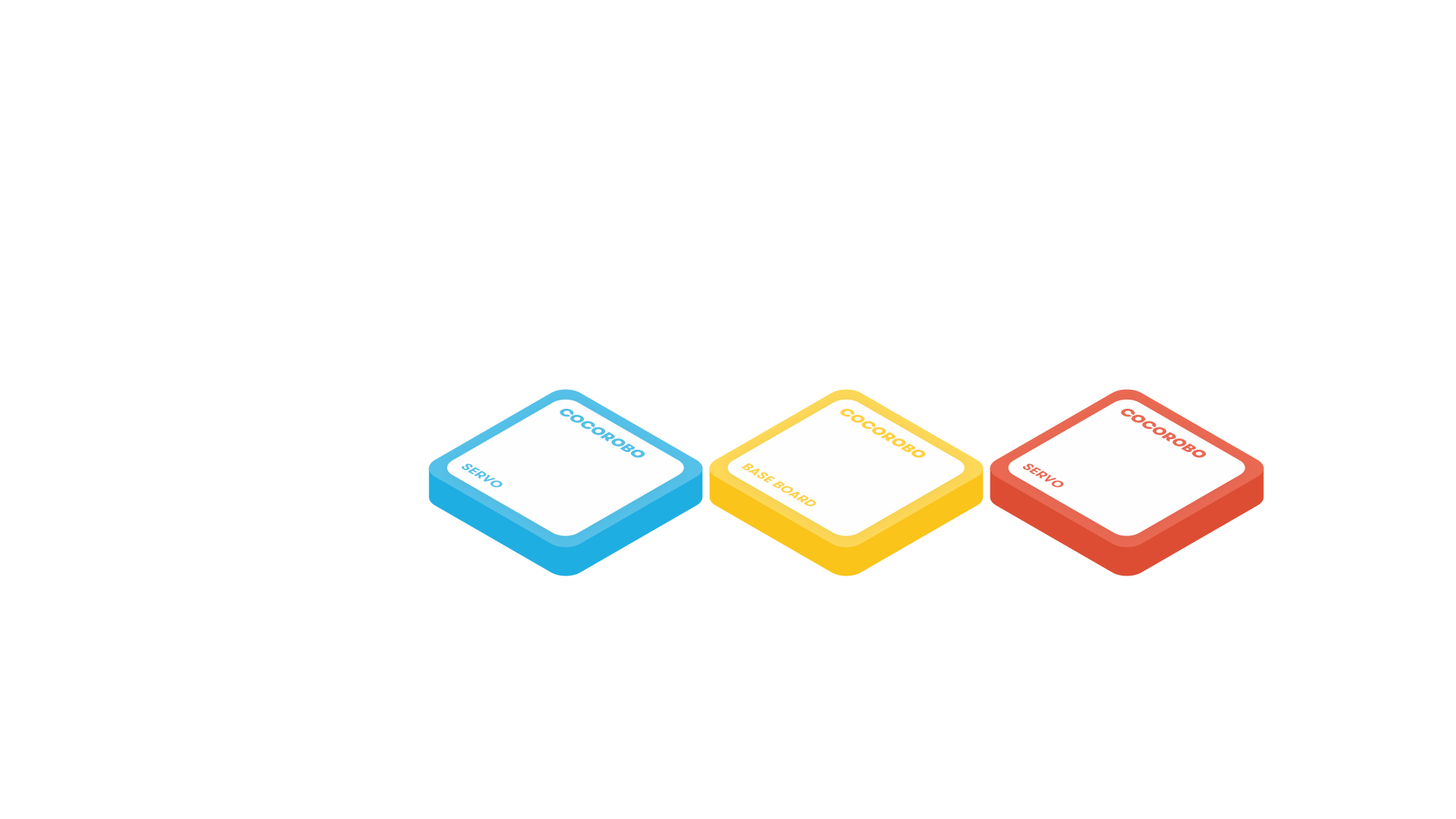
<style>
.page{position:relative;width:1456px;height:819px;background:#ffffff}
.page>*{position:absolute;margin:0}
.t1{font:14.6px "GTWalsheimProTrial-Black";color:#55c0e8;scale:1.04 1}
.t2{font:14.6px "GTWalsheimProTrial-Black";color:#ffd141;scale:1.04 1}
.t3{font:14.6px "GTWalsheimProTrial-Black";color:#ea6953;scale:1.04 1}
.t4{font:12.6px "GTWalsheimProTrial-Bold";color:#55c0e8;scale:1.04 1}
.t5{font:12.6px "GTWalsheimProTrial-Bold";color:#ffd141;scale:1.04 1}
.t6{font:12.6px "GTWalsheimProTrial-Bold";color:#ea6953;scale:1.04 1}
</style>
<div class="page">
<p class="t1" style="left:560px;top:409px;width:85px;height:49px;rotate:30deg">COCOROBO</p>
<p class="t2" style="left:840px;top:409px;width:86px;height:49px;rotate:30deg">COCOROBO</p>
<p class="t3" style="left:1121px;top:409px;width:85px;height:49px;rotate:30deg">COCOROBO</p>
<p class="t4" style="left:462px;top:463px;width:41px;height:25px;rotate:30deg">SERVO</p>
<p class="t5" style="left:741px;top:463px;width:75px;height:44px;rotate:30deg">BASE BOARD</p>
<p class="t6" style="left:1023px;top:463px;width:41px;height:25px;rotate:30deg">SERVO</p>
</div>
